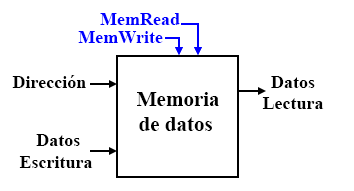
<style>
.page{position:relative;width:354px;height:191px;background:#ffffff}
.page>*{position:absolute;margin:0}
.t1{font:18px "TimesNewRomanPS-BoldMT";color:#0000ff}
.t2{font:18px "TimesNewRomanPS-BoldMT";color:#000000}
.t3{font:21px "TimesNewRomanPS-BoldMT";color:#000000}
</style>
<div class="page">
<p class="t1" style="left:100px;top:13px;width:80px;height:12px">MemRead</p>
<p class="t1" style="left:78px;top:31px;width:85px;height:12px">MemWrite</p>
<p class="t2" style="left:12px;top:75px;width:74px;height:13px">Dirección</p>
<p class="t2" style="left:262px;top:76px;width:62px;height:33px;text-align:center">Datos<br>Lectura</p>
<p class="t3" style="left:137px;top:92px;width:82px;height:39px;text-align:center">Memoria<br> de datos</p>
<p class="t2" style="left:19px;top:134px;width:74px;height:34px;text-align:center">Datos <br>Escritura</p>
</div>
